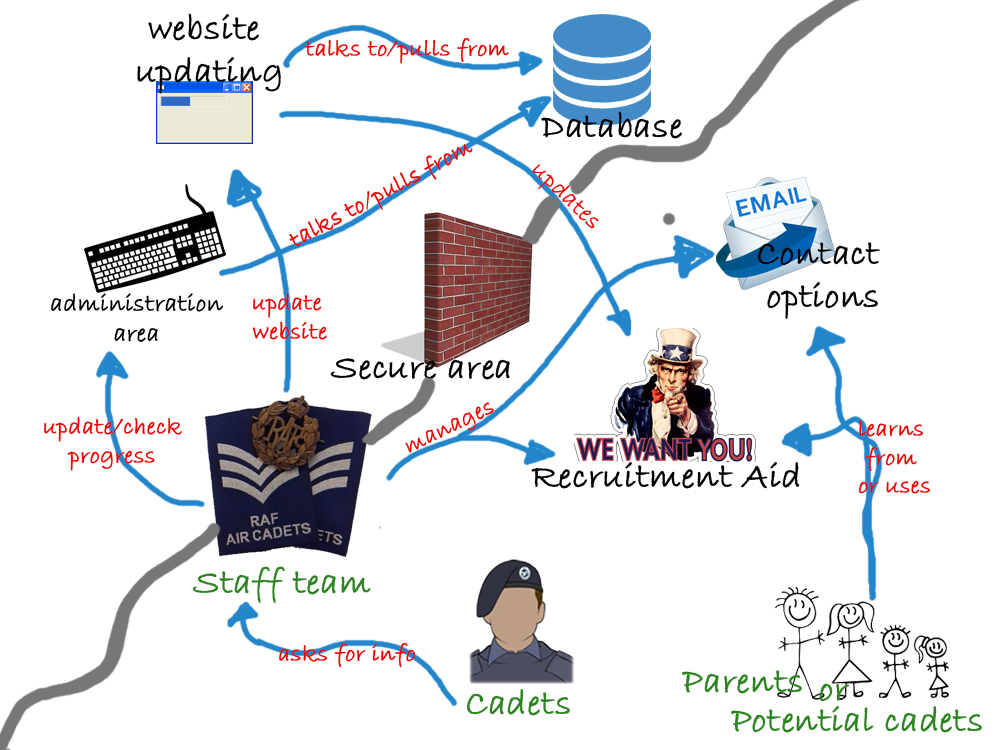
<style>
.page{position:relative;width:1000px;height:750px;background:#ffffff}
.page>*{position:absolute;margin:0}
.t1{font:36px "BradleyHandITC";color:#000000;font-weight:bold}
.t2{font:24px "BradleyHandITC";color:#ec0000;font-weight:bold}
.t3{font:24px "BradleyHandITC";color:#ec0000;font-weight:bold;scale:1.07 1}
.t4{font:25.1px "BradleyHandITC";color:#000000;font-weight:bold}
.t5{font:23.9px "BradleyHandITC";color:#ec0000;font-weight:bold}
.t6{font:36px "BradleyHandITC";color:#2a831e;font-weight:bold}
</style>
<div class="page">
<p class="t1" style="left:137px;top:13px;width:144px;height:81px;text-align:center">website <br>updating</p>
<p class="t2" style="left:305px;top:38px;width:204px;height:26px">talks to/pulls from</p>
<p class="t1" style="left:541px;top:111px;width:141px;height:28px">Database</p>
<p class="t2" style="left:289px;top:144px;width:184px;height:103px;rotate:-28deg">talks to/pulls from</p>
<p class="t3" style="left:532px;top:164px;width:67px;height:65px;rotate:44deg">updates</p>
<p class="t1" style="left:757px;top:242px;width:123px;height:77px;text-align:center">Contact <br>options</p>
<p class="t4" style="left:51px;top:293px;width:173px;height:49px;text-align:center">administration<br>area</p>
<p class="t2" style="left:252px;top:293px;width:75px;height:47px;text-align:center">update <br>website</p>
<p class="t1" style="left:330px;top:358px;width:180px;height:22px">Secure area</p>
<p class="t2" style="left:405px;top:402px;width:89px;height:51px;rotate:-26deg">manages</p>
<p class="t2" style="left:44px;top:417px;width:138px;height:54px;text-align:center">update/check<br>progress</p>
<p class="t5" style="left:858px;top:419px;width:73px;height:75px;text-align:center">learns <br>from <br>or uses</p>
<p class="t1" style="left:531px;top:462px;width:269px;height:27px">Recruitment Aid</p>
<p class="t6" style="left:192px;top:566px;width:179px;height:37px">Staff team</p>
<p class="t2" style="left:279px;top:643px;width:137px;height:25px">asks for info</p>
<p class="t6" style="left:682px;top:670px;width:120px;height:24px">Parents</p>
<p class="t6" style="left:466px;top:689px;width:104px;height:27px">Cadets</p>
<p class="t6" style="left:819px;top:683px;width:31px;height:19px">or</p>
<p class="t6" style="left:731px;top:706px;width:251px;height:27px">Potential cadets</p>
</div>
